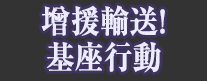
<style>
.page{position:relative;width:207px;height:81px;background:#333333}
.page>*{position:absolute;margin:0}
.t1{font:32px/36px "RyuminPr6N-ExBold";color:#edecfc;font-weight:bold;scale:0.9 1}
</style>
<div class="page">
<p class="t1" style="left:41px;top:5px;width:124px;height:68px;text-align:center">增援輸送!<br>基座行動</p>
</div>
